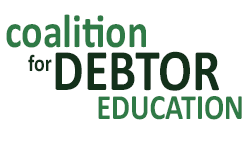
<style>
.page{position:relative;width:250px;height:150px;background:#ffffff}
.page>*{position:absolute;margin:0}
.t1{font:47.6px "Calibri-Bold";color:#2f7a46;scale:0.84 1}
.t2{font:23.8px "Calibri-Bold";color:#13301a;scale:0.84 1}
.t3{font:59.6px "Calibri-Bold";color:#13301a;scale:0.84 1}
.t4{font:35.7px "Calibri-Bold";color:#2f7a46;scale:0.84 1}
</style>
<div class="page">
<p class="t1" style="left:6px;top:14px;width:140px;height:34px">coalition</p>
<p class="t2" style="left:28px;top:54px;width:24px;height:18px">for</p>
<p class="t3" style="left:55px;top:51px;width:164px;height:40px">DEBTOR</p>
<p class="t4" style="left:98px;top:96px;width:144px;height:24px">EDUCATION</p>
</div>
